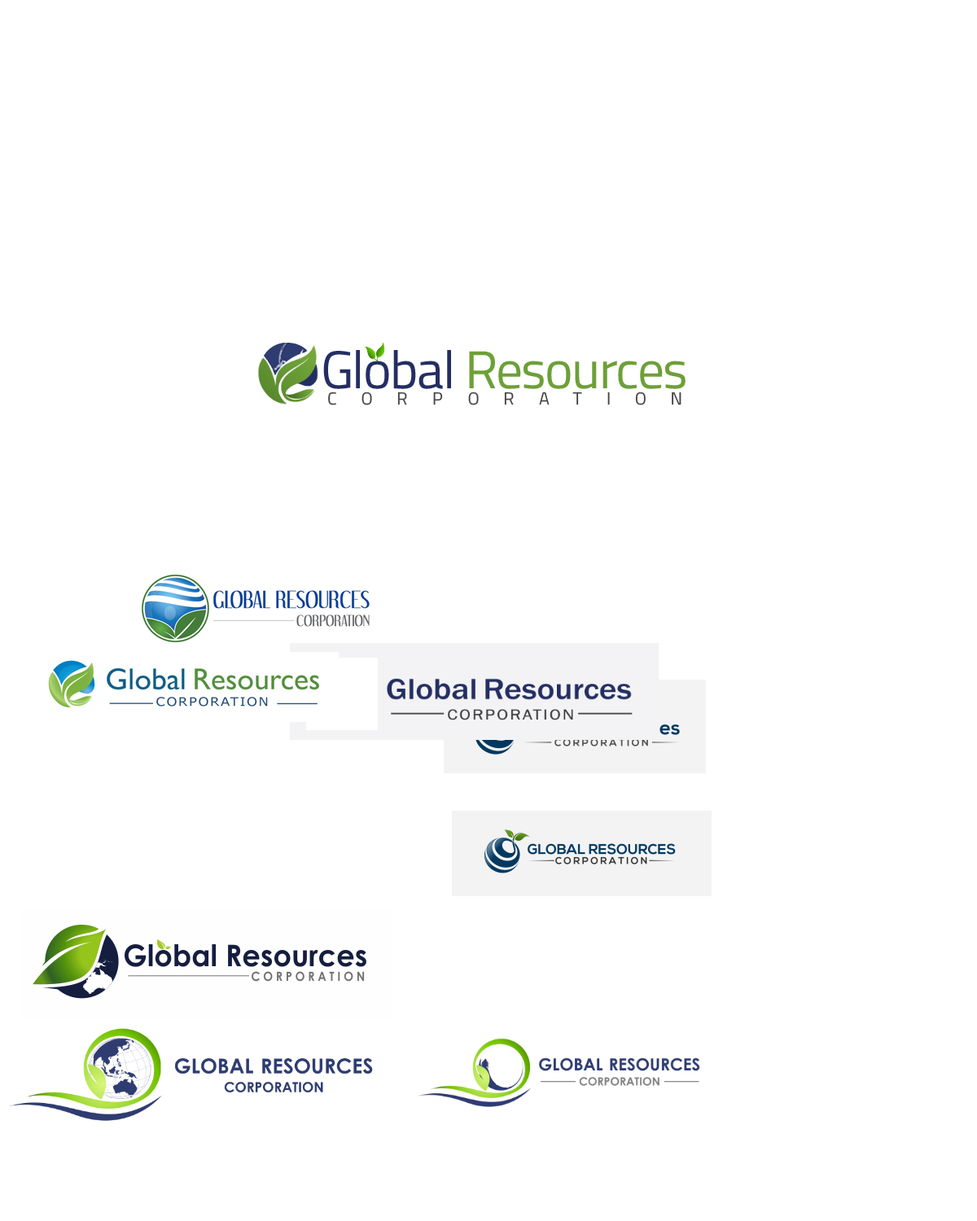
<style>
.page{position:relative;width:977px;height:1221px;background:#ffffff}
.page>*{position:absolute;margin:0}
.t1{font:53.4px "TitilliumWeb-Regular";letter-spacing:-0.025em;color:#6da037}
.t2{font:53.4px "TitilliumWeb-Regular";letter-spacing:-0.025em;color:#242e63}
.t3{font:17.5px "TitilliumWeb-Regular";letter-spacing:1.42em;color:#434343;text-transform:uppercase}
</style>
<div class="page">
<p class="t1" style="left:323px;top:350px;width:362px;height:39px"><span class="t2">Global </span>Resources</p>
<p class="t3" style="left:328px;top:391px;width:353px;height:14px">corporation</p>
</div>
